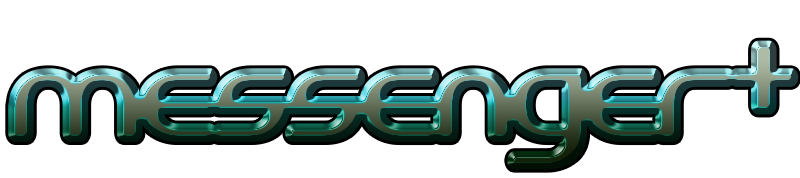
<style>
.page{position:relative;width:800px;height:178px;background:#ffffff}
.page>*{position:absolute;margin:0}
.t1{font:184px "GravitateBRK";letter-spacing:-0.1em;scale:0.79 1}
</style>
<div class="page">
<p class="t1" style="left:8px;top:40px;width:791px;height:130px">messenger+</p>
</div>
